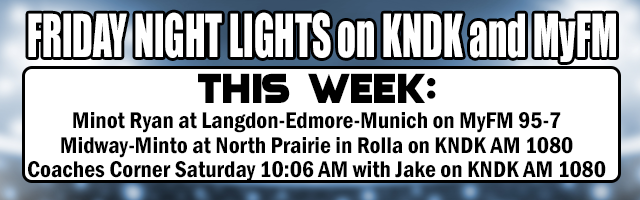
<style>
.page{position:relative;width:640px;height:200px;background:#ffffff}
.page>*{position:absolute;margin:0}
.t1{font:54.8px "Impact";color:#ffffff;scale:0.68 1}
.t2{font:23.8px/12.4px "FranklinGothic-DemiCond";color:#000000}
.t3{font:42.8px/12.4px "Quicksilver";color:#000000;text-transform:uppercase}
</style>
<div class="page">
<p class="t1" style="left:28px;top:12px;width:588px;height:50px">FRIDAY NIGHT LIGHTS on KNDK and MyFM</p>
<p class="t2" style="left:28px;top:73px;width:578px;height:109px;text-align:center"><span class="t3">This week:<br></span><br>Minot Ryan at Langdon-Edmore-Munich on MyFM 95-7<br><br>Midway-Minto at North Prairie in Rolla on KNDK AM 1080<br><br>Coaches Corner Saturday 10:06 AM with Jake on KNDK AM 1080</p>
</div>
